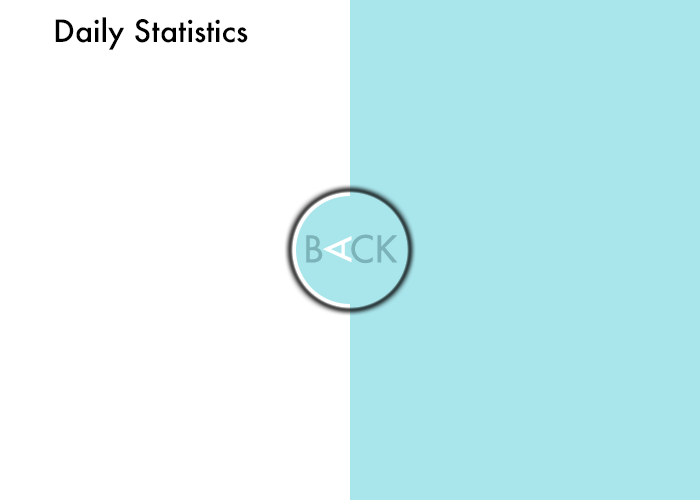
<style>
.page{position:relative;width:700px;height:500px;background:#a9e6ec}
.page>*{position:absolute;margin:0}
.t1{font:30px "Futura-Medium";color:#000000}
</style>
<div class="page">
<p class="t1" style="left:55px;top:17px;width:193px;height:33px">Daily Statistics</p>
</div>
